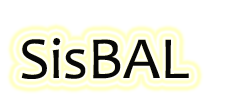
<style>
.page{position:relative;width:234px;height:111px;background:#ffffff}
.page>*{position:absolute;margin:0}
.t1{font:60px "Candara";color:#080808}
</style>
<div class="page">
<p class="t1" style="left:21px;top:38px;width:168px;height:41px">SisBAL</p>
</div>
